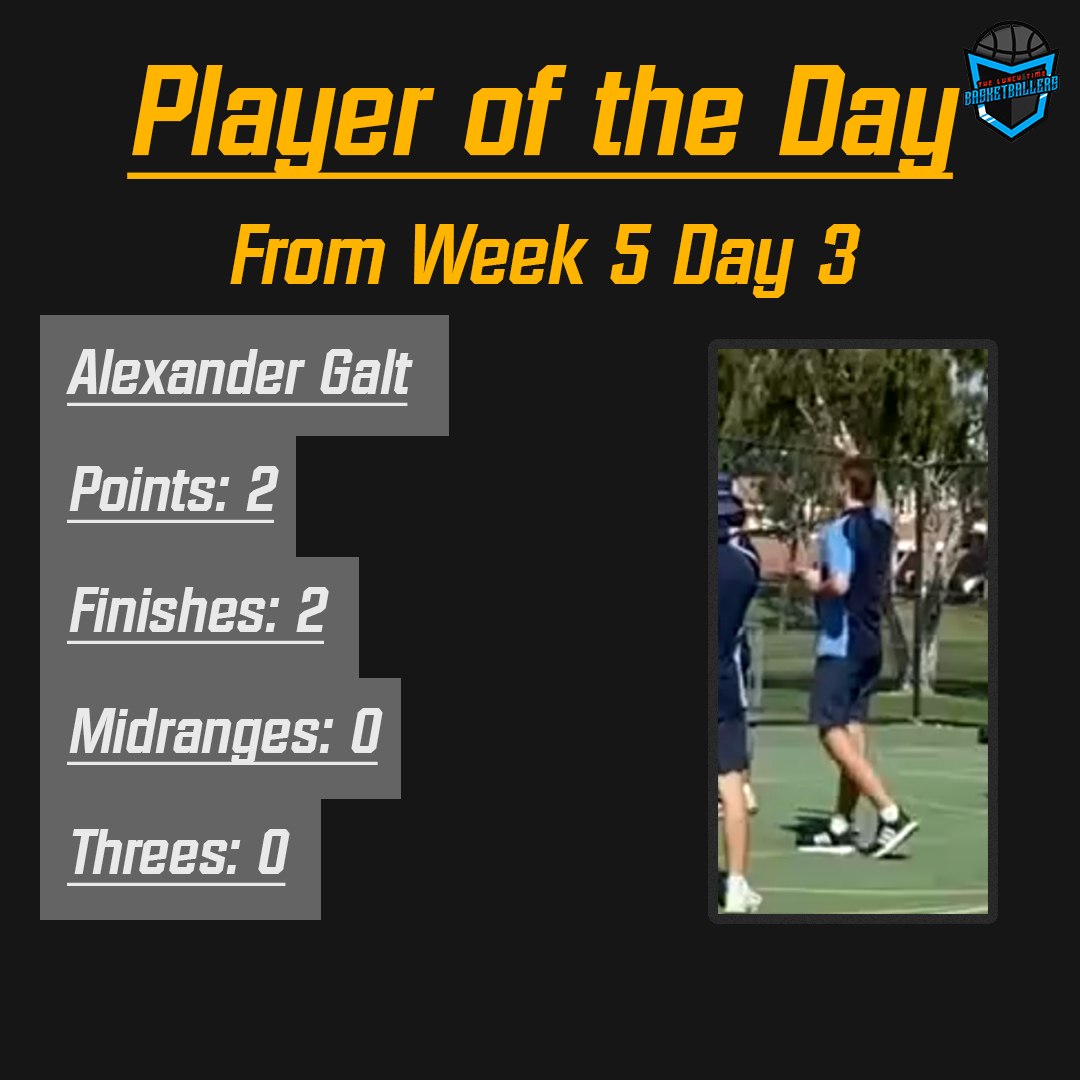
<style>
.page{position:relative;width:1080px;height:1080px;background:#161616}
.page>*{position:absolute;margin:0}
.t1{font:125px/129.2px "Diamante-Serial-BoldItalic";color:#ffb400;text-decoration:underline}
.t2{font:83.3px/129.2px "Diamante-Serial-BoldItalic";color:#ffb400}
.t3{font:62.5px "Diamante-Serial-BoldItalic";color:#e9e9e9;text-decoration:underline}
</style>
<div class="page">
<p class="t1" style="left:127px;top:65px;width:833px;height:233px;text-align:center">Player of the Day<br><span class="t2">From Week 5 Day 3</span></p>
<p class="t3" style="left:66px;top:349px;width:347px;height:57px">Alexander Galt</p>
<p class="t3" style="left:67px;top:466px;width:212px;height:57px">Points: 2</p>
<p class="t3" style="left:67px;top:587px;width:262px;height:57px">Finishes: 2</p>
<p class="t3" style="left:67px;top:708px;width:316px;height:57px">Midranges: 0</p>
<p class="t3" style="left:67px;top:829px;width:223px;height:57px">Threes: 0</p>
</div>
